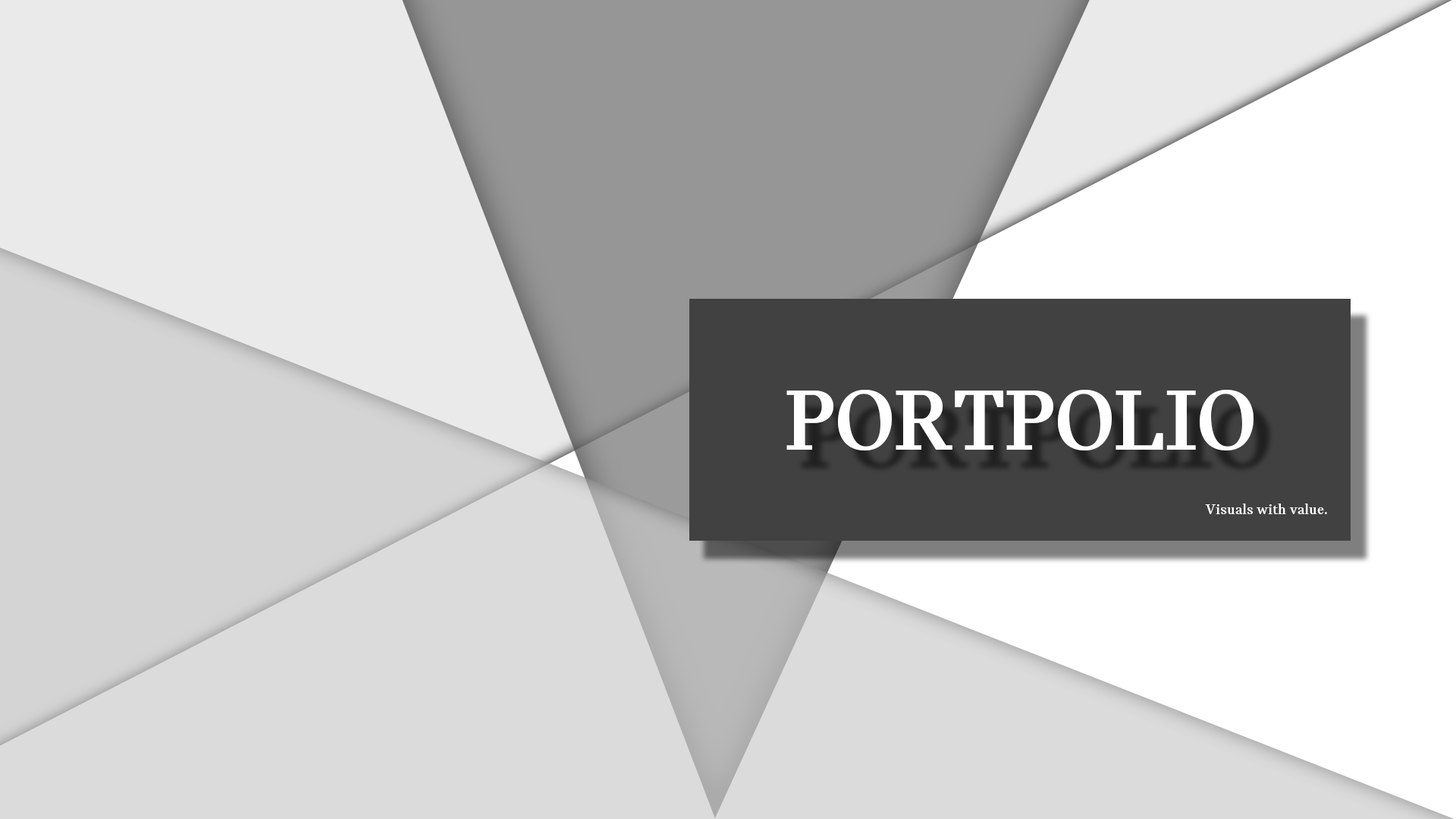
<style>
.page{position:relative;width:1456px;height:819px}
.page>*{position:absolute;margin:0}
.t1{font:91px "MINISerif-Bold";color:#ffffff}
.t2{font:15.2px "MINISerif-Bold";color:#ffffff}
</style>
<div class="page">
<p class="t1" style="left:786px;top:390px;width:468px;height:60px">PORTPOLIO</p>
<p class="t2" style="left:1205px;top:504px;width:122px;height:10px">Visuals with value.</p>
</div>
